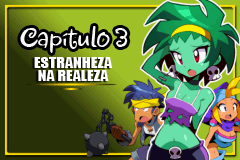
<style>
.page{position:relative;width:240px;height:160px}
.page>*{position:absolute;margin:0}
.t1{font:32px "Jewels";color:#f8f8f8;scale:0.95 1}
.t2{font:14.2px "Impact";color:#ffffff;scale:1.13 1}
</style>
<div class="page">
<p class="t1" style="left:20px;top:26px;width:108px;height:27px">Capítulo 3</p>
<p class="t2" style="left:34px;top:57px;width:78px;height:11px">ESTRANHEZA</p>
<p class="t2" style="left:38px;top:70px;width:71px;height:11px">NA REALEZA</p>
</div>
